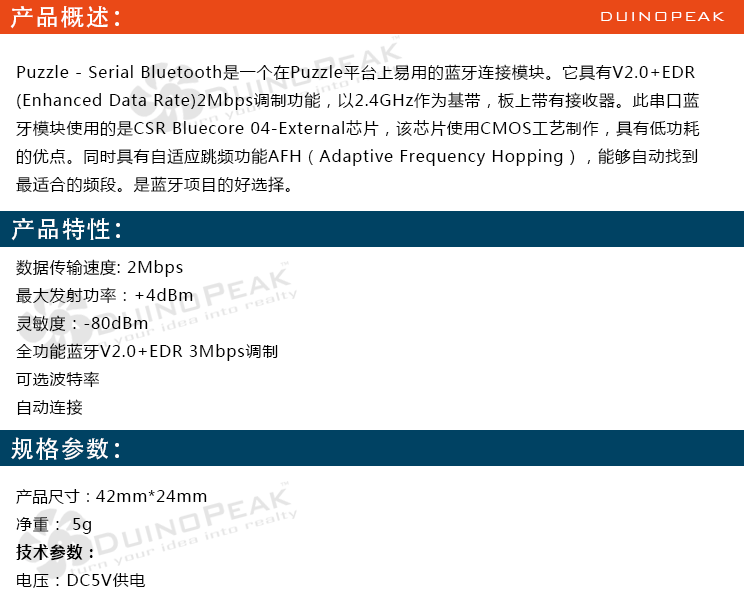
<style>
.page{position:relative;width:744px;height:595px;background:#ffffff}
.page>*{position:absolute;margin:0}
.t1{font:24px "AdobeHeitiStd-Regular";letter-spacing:0.05em;color:#ffffff}
.t2{font:18px "BankGothicBT-Light";letter-spacing:0.05em;color:#ffffff}
.t3{font:16px "MicrosoftYaHei";letter-spacing:0.05em;color:#000000}
.t4{font:16px "MicrosoftYaHei";color:#000000}
.t5{font:16px "MicrosoftYaHei-Bold";letter-spacing:0.05em;color:#000000}
</style>
<div class="page">
<p class="t1" style="left:10px;top:6px;width:109px;height:23px">产品概述：</p>
<p class="t2" style="left:601px;top:12px;width:124px;height:9px">DUINOPEAK</p>
<p class="t3" style="left:16px;top:64px;width:684px;height:129px">Puzzle - Serial Bluetooth是一个在Puzzle平台上易用的蓝牙连接模块。它具有V2.0+EDR<br>(Enhanced Data Rate)2Mbps调制功能，以2.4GHz作为基带，板上带有接收器。此串口蓝<br>牙模块使用的是CSR Bluecore 04-External芯片，该芯片使用CMOS工艺制作，具有低功耗<br>的优点。同时具有自适应跳频功能AFH（Adaptive Frequency Hopping），能够自动找到<br>最适合的频段。是蓝牙项目的好选择。</p>
<p class="t1" style="left:11px;top:217px;width:109px;height:24px">产品特性：</p>
<p class="t3" style="left:16px;top:259px;width:262px;height:156px">数据传输速度: 2Mbps<br>最大发射功率：+4dBm<br>灵敏度：-80dBm<br>全功能蓝牙V2.0+EDR 3Mbps调制<br>可选波特率<br>自动连接</p>
<p class="t1" style="left:11px;top:437px;width:108px;height:23px">规格参数：</p>
<p class="t3" style="left:16px;top:489px;width:191px;height:99px"><span class="t4">产品尺寸：</span>42mm*24mm<br>净重： 5g<br><span class="t5">技术参数：<br></span>电压：DC5V供电</p>
</div>
